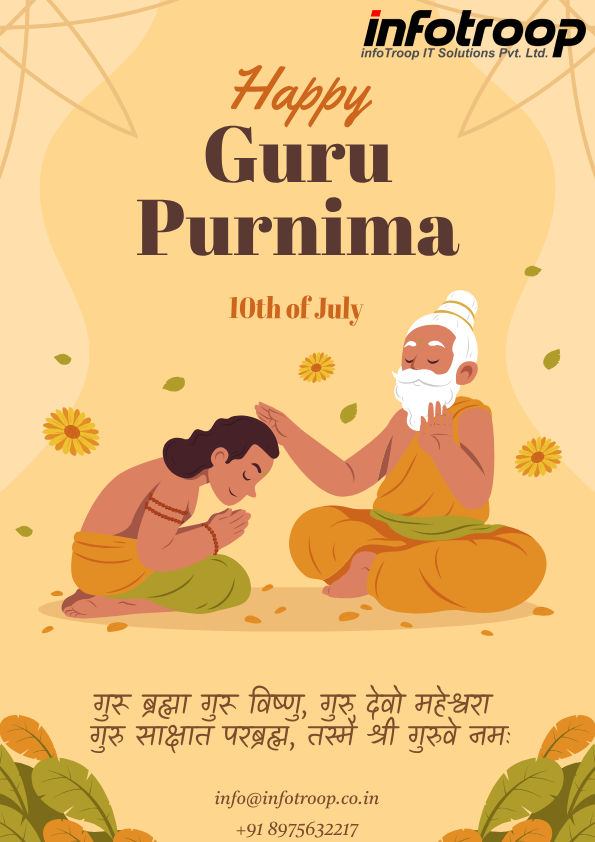
<style>
.page{position:relative;width:595px;height:842px;background:#ffd68e}
.page>*{position:absolute;margin:0}
.t1{font:61px "Yellowtail-Regular";color:#cd651d}
.t2{font:78.9px/73px "AbrilFatface-Regular";color:#593931}
.t3{font:29.4px "AbrilFatface-Regular";color:#cd651d;scale:0.86 1}
.t4{font:30.1px/31.6px "Kalam-Regular";color:#7c4d2c;scale:0.95 1}
.t5{font:18px/30.8px "TiroDevaMarathi-Italic";color:#7c4d2c}
</style>
<div class="page">
<p class="t1" style="left:230px;top:65px;width:143px;height:63px">Happy</p>
<p class="t2" style="left:137px;top:125px;width:323px;height:131px;text-align:center">Guru<br>Purnima</p>
<p class="t3" style="left:228px;top:295px;width:136px;height:31px">10th of July</p>
<p class="t4" style="left:89px;top:684px;width:422px;height:70px;text-align:center">गुरू ब्रह्मा गुरू विष्णु, गुरु देवो महेश्वरा <br>गुरु साक्षात परब्रह्म, तस्मै श्री गुरुवे नमः</p>
<p class="t5" style="left:214px;top:790px;width:166px;height:48px;text-align:center">info@infotroop.co.in<br>+91 8975632217</p>
</div>
